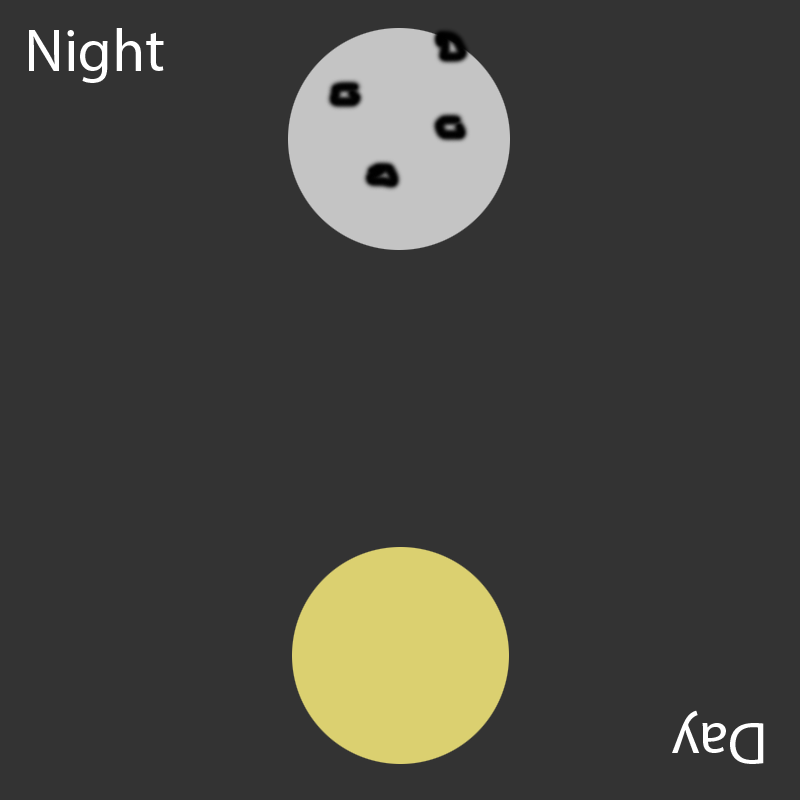
<style>
.page{position:relative;width:800px;height:800px;background:#333333}
.page>*{position:absolute;margin:0}
.t1{font:60px "MyriadPro-Regular";color:#ffffff}
</style>
<div class="page">
<p class="t1" style="left:29px;top:28px;width:135px;height:55px">Night</p>
</div>
